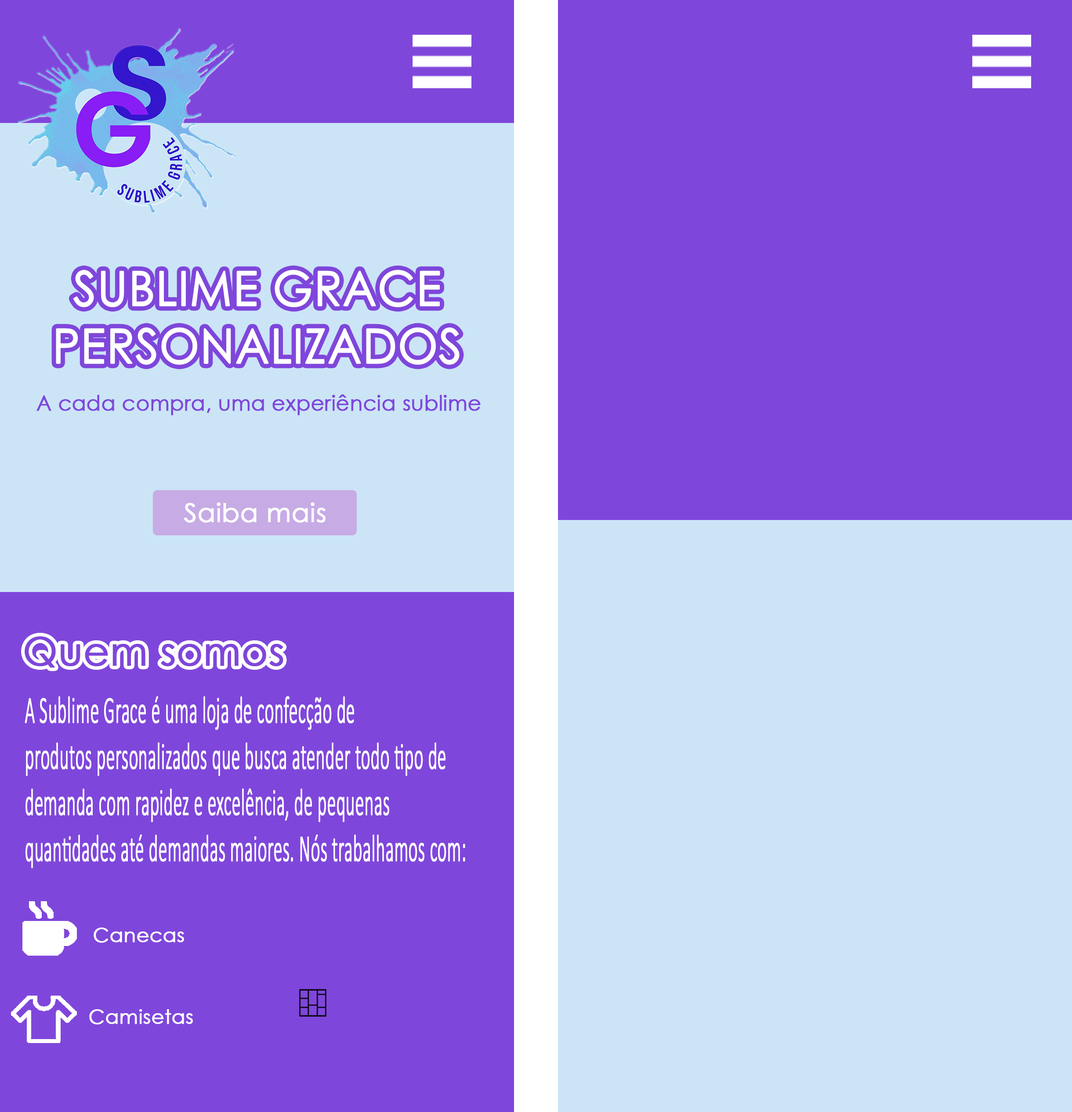
<style>
.page{position:relative;width:1072px;height:1112px;background:#7f46db}
.page>*{position:absolute;margin:0}
.t1{font:47.9px "CenturyGothic";color:#ffffff;font-weight:bold;scale:0.95 1}
.t2{font:21.5px "CenturyGothic";color:#7f46db;font-weight:bold;scale:0.95 1}
.t3{font:26px "CenturyGothic";color:#ffffff;font-weight:bold}
.t4{font:39.5px "CenturyGothic";color:#7f46db;font-weight:bold}
.t5{font:38.4px "Calibri-Light";color:#ffffff;font-weight:bold;scale:0.46 1}
.t6{font:19.8px "CenturyGothic";color:#ffffff;font-weight:bold}
</style>
<div class="page">
<p class="t1" style="left:56px;top:270px;width:404px;height:95px;text-align:center">SUBLIME GRACE<br>PERSONALIZADOS</p>
<p class="t2" style="left:36px;top:395px;width:445px;height:21px">A cada compra, uma experiência sublime</p>
<p class="t3" style="left:184px;top:503px;width:142px;height:20px">Saiba mais</p>
<p class="t4" style="left:25px;top:637px;width:258px;height:31px">Quem somos</p>
<p class="t5" style="left:25px;top:696px;width:440px;height:173px">A Sublime Grace é uma loja de confecção de <br>produtos personalizados que busca atender todo tipo de <br>demanda com rapidez e excelência, de pequenas <br>quantidades até demandas maiores. Nós trabalhamos com:</p>
<p class="t6" style="left:94px;top:928px;width:90px;height:15px">Canecas</p>
<p class="t6" style="left:89px;top:1010px;width:104px;height:15px">Camisetas</p>
</div>
